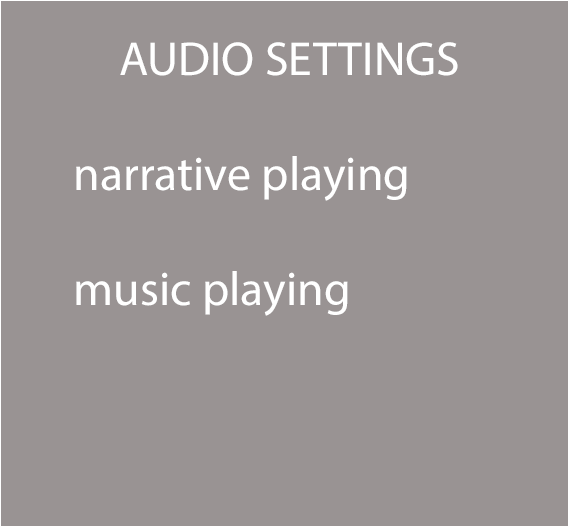
<style>
.page{position:relative;width:568px;height:526px;background:#999393}
.page>*{position:absolute;margin:0}
.t1{font:48px "MyriadPro-Regular";color:#ffffff}
</style>
<div class="page">
<p class="t1" style="left:76px;top:42px;width:382px;height:274px;text-align:center">AUDIO SETTINGS<br><br> narrative playing<br><br> music playing</p>
</div>
